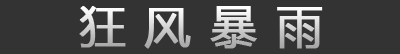
<style>
.page{position:relative;width:400px;height:54px;background:#333333}
.page>*{position:absolute;margin:0}
.t1{font:46px "MicrosoftYaHei";letter-spacing:0.4em;font-weight:bold}
</style>
<div class="page">
<p class="t1" style="left:79px;top:6px;width:244px;height:43px">狂风暴雨</p>
</div>
